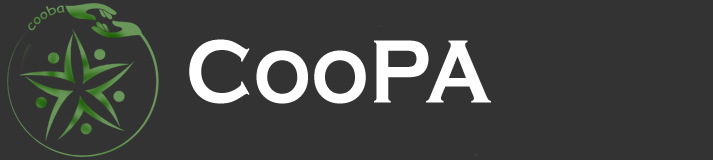
<style>
.page{position:relative;width:713px;height:160px;background:#333333}
.page>*{position:absolute;margin:0}
.t1{font:92.9px "CopperplateGothic-Bold";letter-spacing:0.01em;color:#ffffff;scale:0.86 1}
</style>
<div class="page">
<p class="t1" style="left:189px;top:39px;width:302px;height:65px">CooPA</p>
</div>
